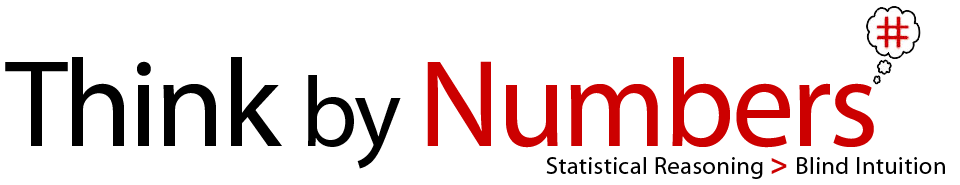
<style>
.page{position:relative;width:960px;height:185px;background:#ffffff}
.page>*{position:absolute;margin:0}
.t1{font:125px "MyriadPro-Regular";letter-spacing:-0.025em;color:#cc0000}
.t2{font:125px "MyriadPro-Regular";letter-spacing:-0.025em;color:#000000}
.t3{font:100px "MyriadPro-Regular";letter-spacing:-0.025em;color:#000000}
.t4{font:24px "MyriadPro-Regular";letter-spacing:0.025em;color:#000000}
.t5{font:30px "MyriadPro-Bold";letter-spacing:0.025em;color:#cc0000}
</style>
<div class="page">
<p class="t1" style="left:5px;top:57px;width:869px;height:112px"><span class="t2">Think </span><span class="t3">by </span>Numbers</p>
<p class="t4" style="left:546px;top:157px;width:399px;height:22px">Statistical Reasoning <span class="t5">&gt; </span>Blind Intuition</p>
</div>
